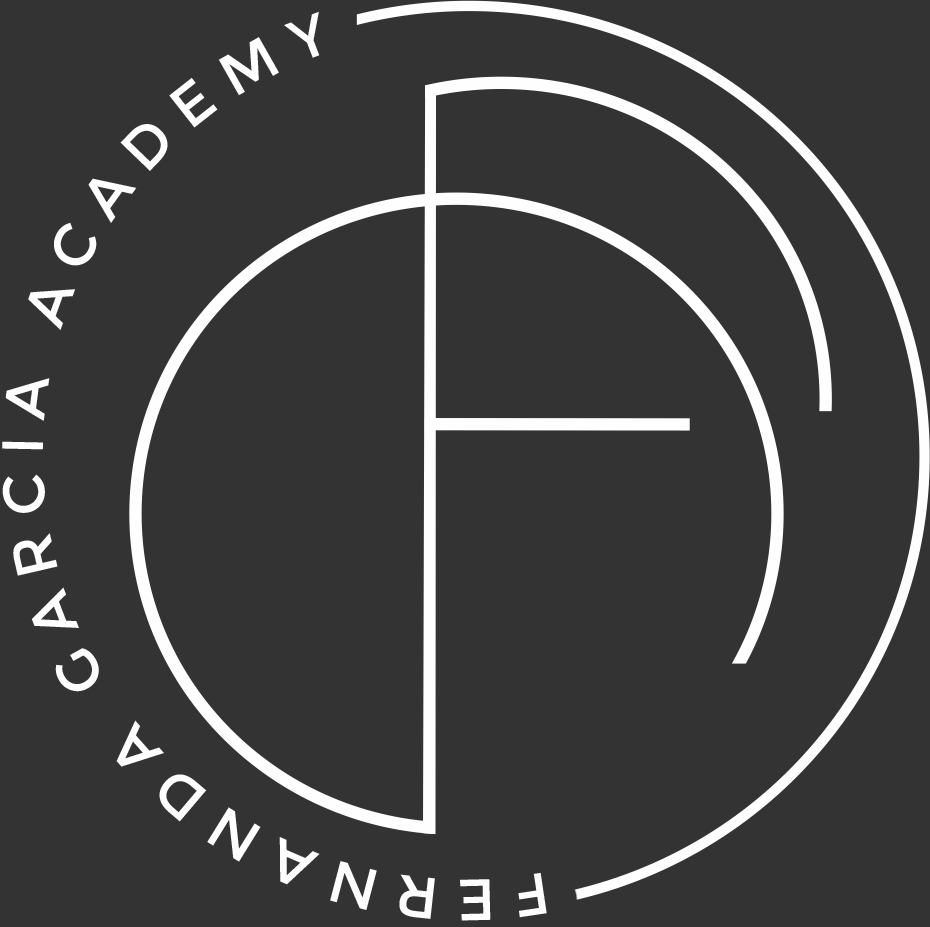
<style>
.page{position:relative;width:930px;height:927px;background:#333333}
.page>*{position:absolute;margin:0}
.t1{font:58.3px "Montserrat-Regular";letter-spacing:0.28em;color:#fefefe}
</style>
<div class="page">
<p class="t1" style="left:2px;top:11px;width:545px;height:910px;text-align:center">FERNANDA GARCIA ACADEMY</p>
</div>
